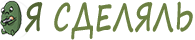
<style>
.page{position:relative;width:195px;height:40px;background:#ffffff}
.page>*{position:absolute;margin:0}
.t1{font:36.7px "SegoePrint-Bold";color:#6c8042;scale:0.69 1}
.t2{font:36.7px "SegoePrint-Bold";color:#536534;scale:0.69 1}
</style>
<div class="page">
<p class="t1" style="left:25px;top:1px;width:168px;height:39px"><span class="t2">Я</span> СДЕЛЯЛЬ</p>
</div>
